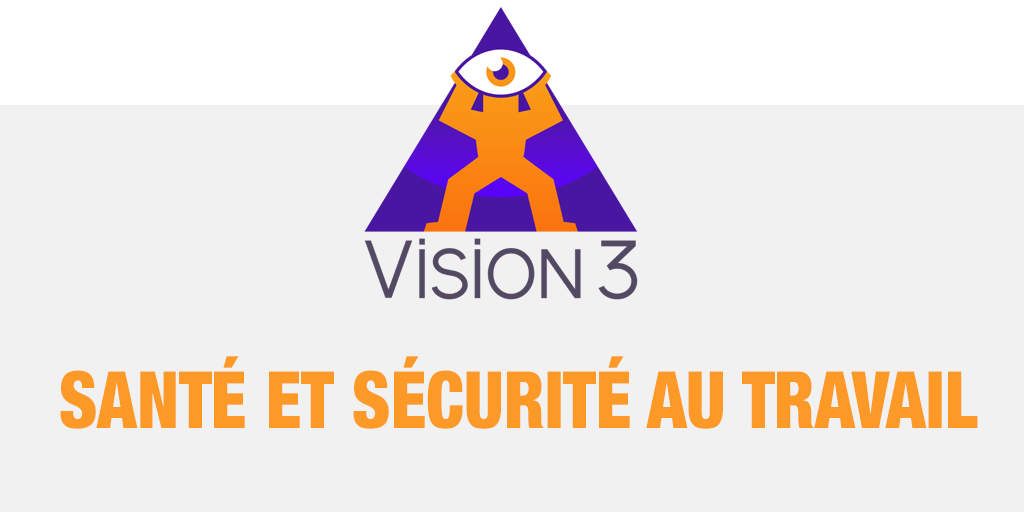
<style>
.page{position:relative;width:1024px;height:512px;background:#f1f1f1}
.page>*{position:absolute;margin:0}
.t1{font:79px "HelveticaNeue-CondensedBlack";color:#fd9a27;text-transform:uppercase;scale:0.9 1}
</style>
<div class="page">
<p class="t1" style="left:60px;top:356px;width:918px;height:73px">SAnté et sécurité au travail</p>
</div>
